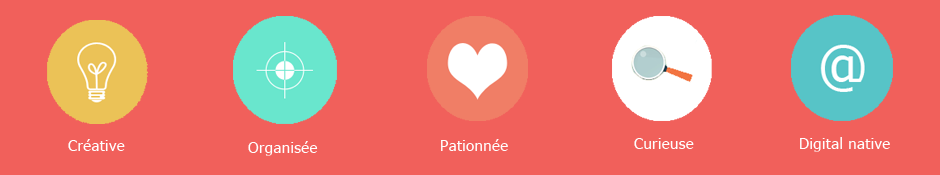
<style>
.page{position:relative;width:940px;height:175px;background:#f1605b}
.page>*{position:absolute;margin:0}
.t1{font:15px "Tahoma";letter-spacing:0.025em;color:#ffffff}
</style>
<div class="page">
<p class="t1" style="left:800px;top:137px;width:90px;height:15px">Digital native</p>
<p class="t1" style="left:68px;top:139px;width:57px;height:12px">Créative</p>
<p class="t1" style="left:248px;top:141px;width:70px;height:15px">Organisée</p>
<p class="t1" style="left:441px;top:139px;width:67px;height:12px">Pationnée</p>
<p class="t1" style="left:634px;top:138px;width:60px;height:11px">Curieuse</p>
</div>
